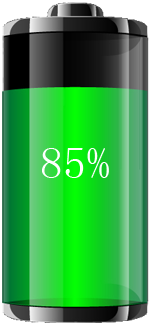
<style>
.page{position:relative;width:150px;height:323px}
.page>*{position:absolute;margin:0}
.t1{font:44.6px "SimSun";color:#ffffff;scale:1.03 1}
</style>
<div class="page">
<p class="t1" style="left:42px;top:148px;width:67px;height:30px">85%</p>
</div>
